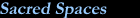
<style>
.page{position:relative;width:140px;height:18px;background:#000000}
.page>*{position:absolute;margin:0}
.t1{font:18px "Garamond-Bold";color:#99ccff;font-style:italic}
</style>
<div class="page">
<p class="t1" style="left:0px;top:2px;width:107px;height:17px">Sacred Spaces</p>
</div>
